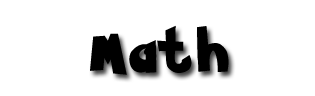
<style>
.page{position:relative;width:315px;height:96px;background:#ffffff}
.page>*{position:absolute;margin:0}
.t1{font:48px "PokemonSolidNormal";letter-spacing:0.14em;color:#000000}
</style>
<div class="page">
<p class="t1" style="left:90px;top:25px;width:139px;height:50px">Math</p>
</div>
